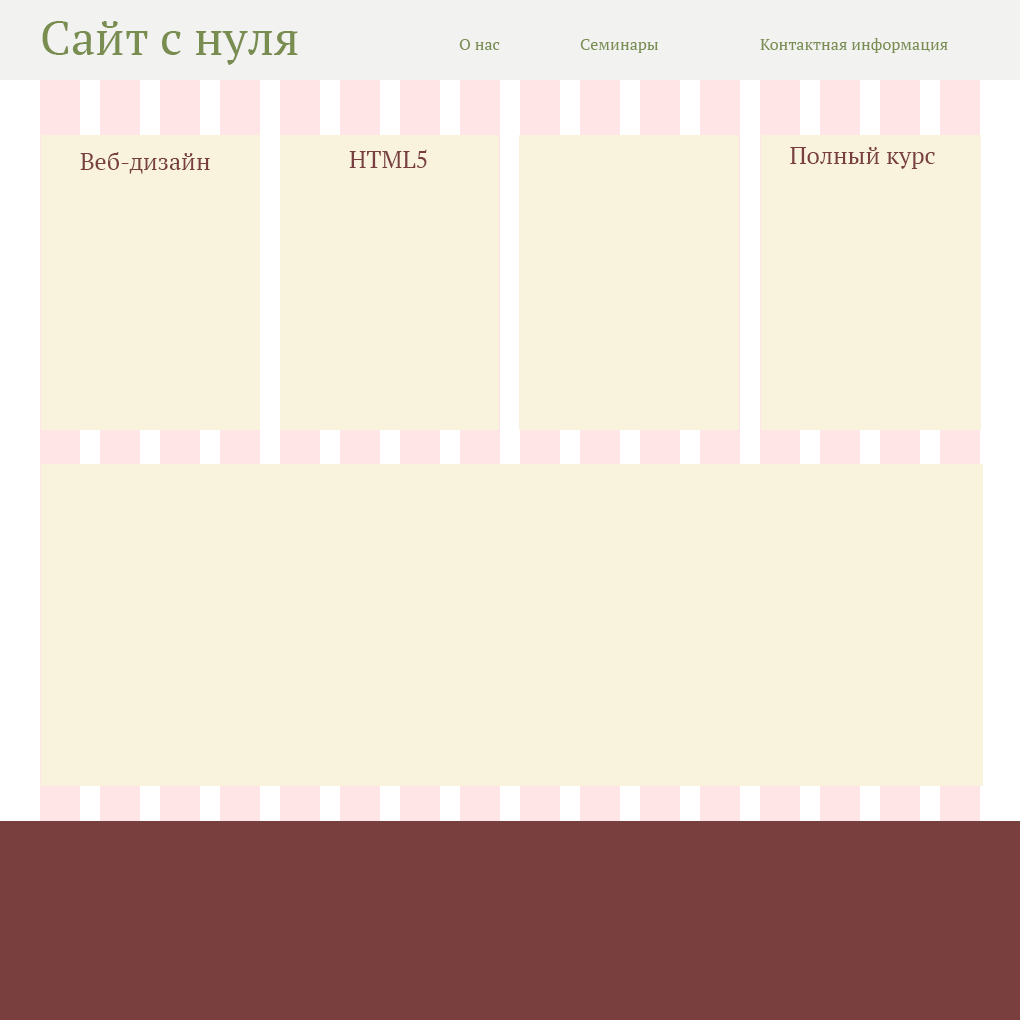
<style>
.page{position:relative;width:1020px;height:1020px;background:#f9f2dd}
.page>*{position:absolute;margin:0}
.t1{font:48px "PTSerif-Regular";color:#798d50}
.t2{font:16px "PTSerif-Regular";color:#798d50}
.t3{font:24px "PTSerif-Regular";color:#793f3e}
</style>
<div class="page">
<p class="t1" style="left:42px;top:21px;width:256px;height:44px">Сайт с нуля</p>
<p class="t2" style="left:459px;top:39px;width:41px;height:11px">О нас</p>
<p class="t2" style="left:580px;top:39px;width:78px;height:14px">Семинары</p>
<p class="t2" style="left:760px;top:38px;width:188px;height:15px">Контактная информация</p>
<p class="t3" style="left:349px;top:149px;width:78px;height:19px">HTML5</p>
<p class="t3" style="left:790px;top:147px;width:145px;height:22px">Полный курс</p>
<p class="t3" style="left:80px;top:152px;width:130px;height:22px">Веб-дизайн</p>
</div>
